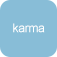
<style>
.page{position:relative;width:57px;height:57px;background:#88bdd7}
.page>*{position:absolute;margin:0}
.t1{font:12px "ArialMT";letter-spacing:-0.025em;color:#ffffff}
</style>
<div class="page">
<p class="t1" style="left:13px;top:23px;width:32px;height:10px">karma</p>
</div>
